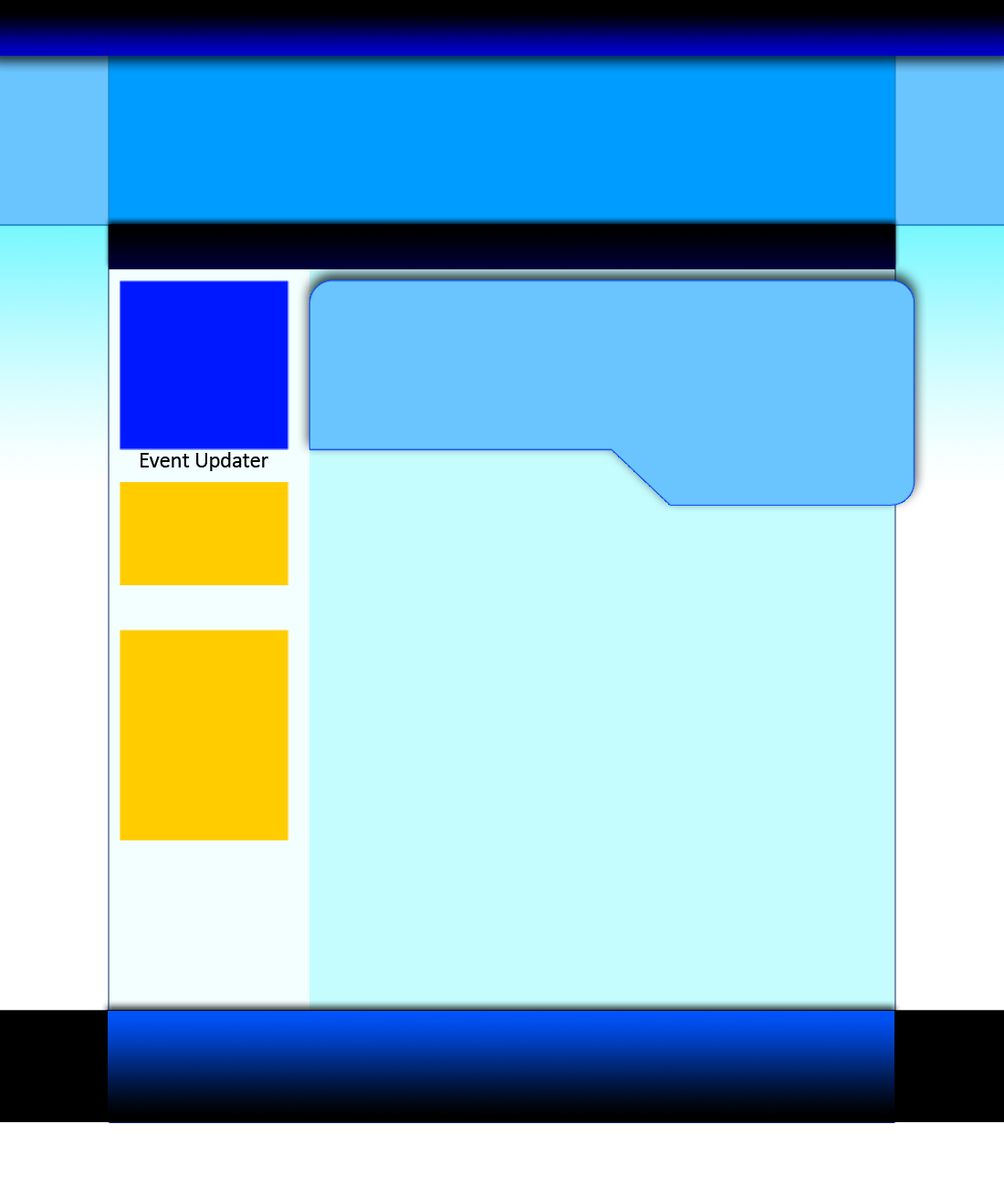
<style>
.page{position:relative;width:1004px;height:1187px;background:#c5fdff}
.page>*{position:absolute;margin:0}
.t1{font:22.4px "Calibri";letter-spacing:-0.007em;color:#000001}
</style>
<div class="page">
<p class="t1" style="left:141px;top:452px;width:127px;height:19px">Event Updater</p>
</div>
